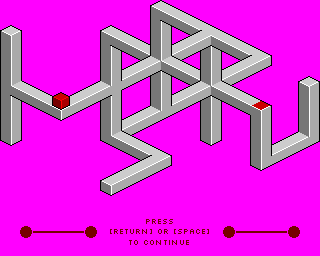
<style>
.page{position:relative;width:320px;height:256px;background:#ff00ff}
.page>*{position:absolute;margin:0}
.t1{font:9px "Silkscreen";color:#770000}
</style>
<div class="page">
<p class="t1" style="left:110px;top:219px;width:99px;height:26px;text-align:center">PRESS<br>[RETURN] or [SPACE]<br>to continue</p>
</div>
